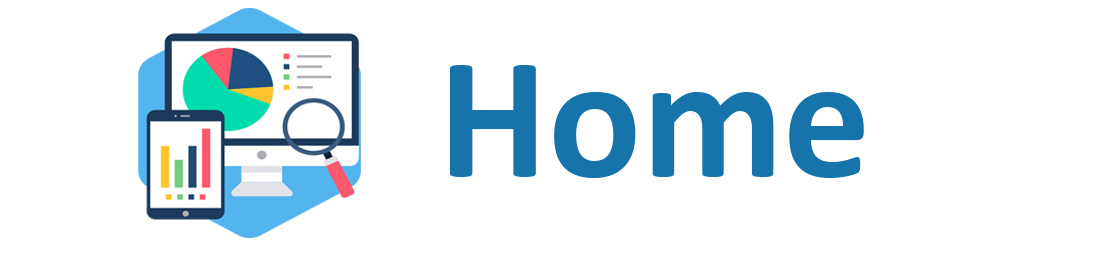
<style>
.page{position:relative;width:1113px;height:268px;background:#ffffff}
.page>*{position:absolute;margin:0}
.t1{font:174px "Calibri-Bold";color:#1774ab}
</style>
<div class="page">
<p class="t1" style="left:449px;top:65px;width:415px;height:113px">Home</p>
</div>
